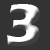
<style>
.page{position:relative;width:50px;height:50px;background:#333333}
.page>*{position:absolute;margin:0}
.t1{font:60px "ErasITC-Bold"}
</style>
<div class="page">
<p class="t1" style="left:7px;top:4px;width:33px;height:42px">3</p>
</div>
